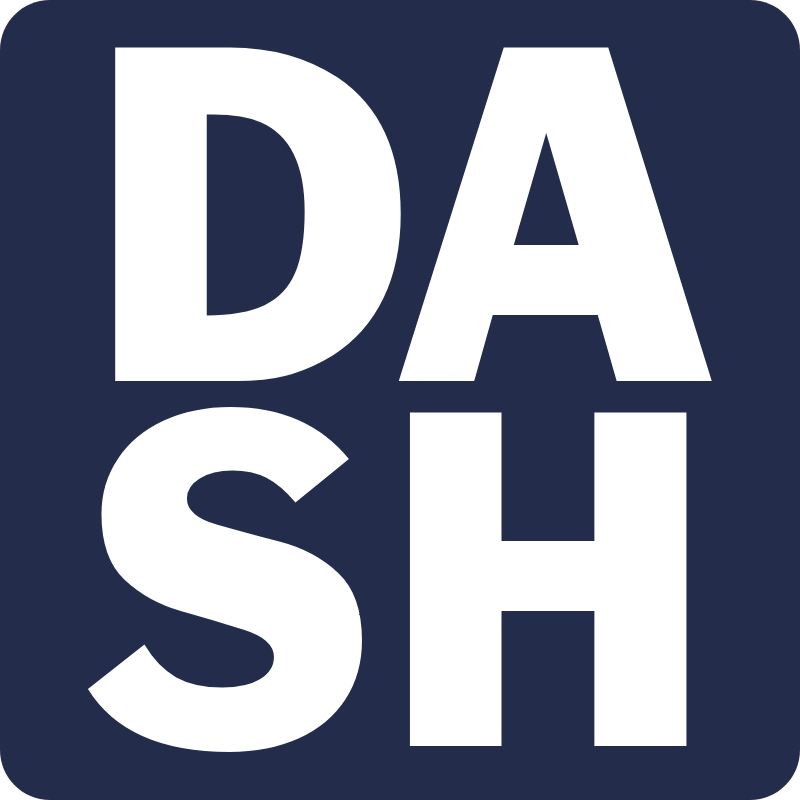
<style>
.page{position:relative;width:800px;height:800px;background:#232d4b}
.page>*{position:absolute;margin:0}
.t1{font:500px "FranklinGothic";color:#ffffff}
</style>
<div class="page">
<p class="t1" style="left:87px;top:47px;width:625px;height:705px;text-align:center">DA<br>SH</p>
</div>
